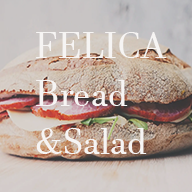
<style>
.page{position:relative;width:192px;height:192px}
.page>*{position:absolute;margin:0}
.t1{font:36px/48px "JavaneseText";color:#ffffff}
</style>
<div class="page">
<p class="t1" style="left:36px;top:32px;width:131px;height:122px">FELICA<br>Bread<br>&amp;Salad</p>
</div>
